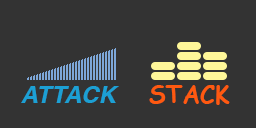
<style>
.page{position:relative;width:256px;height:128px;background:#333333}
.page>*{position:absolute;margin:0}
.t1{font:24px "Helvetica-BoldOblique";color:#1ca0d4}
.t2{font:24px "ComicSansMS-Bold";color:#ff5910}
</style>
<div class="page">
<p class="t1" style="left:21px;top:85px;width:209px;height:20px">ATTACK     <span class="t2">STACK</span></p>
</div>
